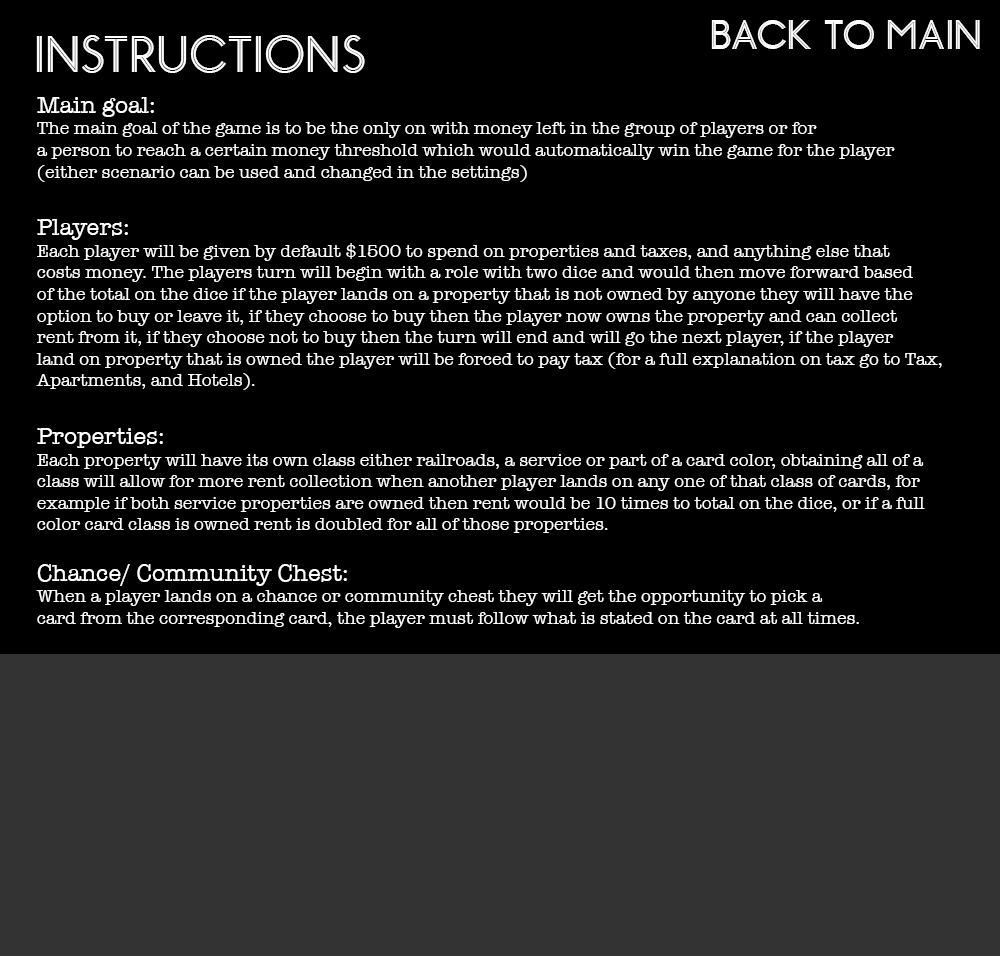
<style>
.page{position:relative;width:1000px;height:956px;background:#000000}
.page>*{position:absolute;margin:0}
.t1{font:48px "Monopoly-Inline";color:#ffffff}
.t2{font:60px "Monopoly-Inline";color:#ffffff}
.t3{font:18px "AmericanTypewriter";color:#ffffff}
.t4{font:24px "AmericanTypewriter";color:#ffffff}
</style>
<div class="page">
<p class="t1" style="left:711px;top:20px;width:269px;height:29px">BACK TO MAIN</p>
<p class="t2" style="left:36px;top:35px;width:329px;height:38px">INSTRUCTIONS</p>
<p class="t3" style="left:36px;top:97px;width:906px;height:531px"><span class="t4">Main goal: <br></span>The main goal of the game is to be the only on with money left in the group of players or for <br>a person to reach a certain money threshold which would automatically win the game for the player <br>(either scenario can be used and changed in the settings)<br><span class="t4"><br>Players:<br></span>Each player will be given by default $1500 to spend on properties and taxes, and anything else that <br>costs money. The players turn will begin with a role with two dice and would then move forward based <br>of the total on the dice if the player lands on a property that is not owned by anyone they will have the <br>option to buy or leave it, if they choose to buy then the player now owns the property and can collect <br>rent from it, if they choose not to buy then the turn will end and will go the next player, if the player <br>land on property that is owned the player will be forced to pay tax (for a full explanation on tax go to Tax,<br>Apartments, and Hotels).<br><span class="t4"><br>Properties:<br></span>Each property will have its own class either railroads, a service or part of a card color, obtaining all of a <br>class will allow for more rent collection when another player lands on any one of that class of cards, for <br>example if both service properties are owned then rent would be 10 times to total on the dice, or if a full <br>color card class is owned rent is doubled for all of those properties.<br><br><span class="t4">Chance/ Community Chest:<br></span>When a player lands on a chance or community chest they will get the opportunity to pick a <br>card from the corresponding card, the player must follow what is stated on the card at all times.</p>
</div>
